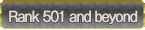
<style>
.page{position:relative;width:145px;height:30px}
.page>*{position:absolute;margin:0}
.t1{font:14px "GothicMB101Pro-Regular";letter-spacing:-0.08em;color:#e6dad2;font-weight:bold;scale:0.9 1}
</style>
<div class="page">
<p class="t1" style="left:9px;top:10px;width:129px;height:14px">Rank 501 and beyond</p>
</div>
